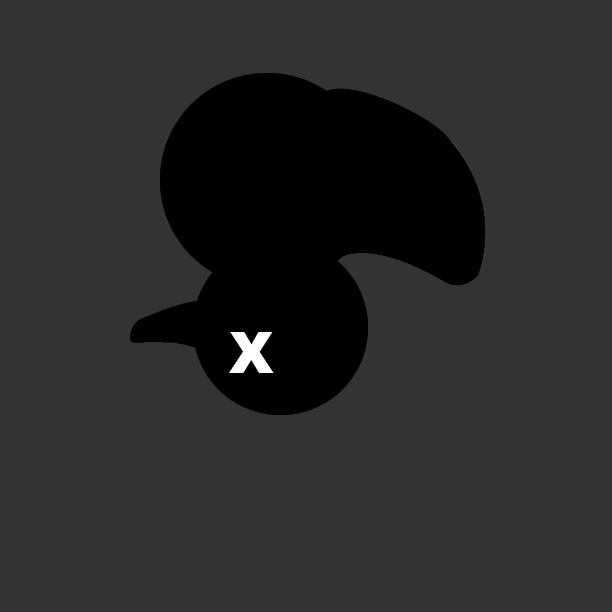
<style>
.page{position:relative;width:612px;height:612px;background:#333333}
.page>*{position:absolute;margin:0}
.t1{font:57px "Arial-Black";letter-spacing:-0.08em;color:#ffffff}
</style>
<div class="page">
<p class="t1" style="left:229px;top:332px;width:45px;height:41px">X</p>
</div>
